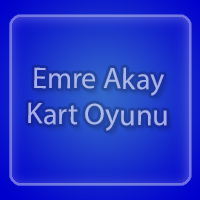
<style>
.page{position:relative;width:200px;height:200px}
.page>*{position:absolute;margin:0}
.t1{font:30px "MyriadPro-Regular";color:#aab4e6}
</style>
<div class="page">
<p class="t1" style="left:28px;top:67px;width:139px;height:64px;text-align:center;rotate:1deg">Emre Akay<br>Kart Oyunu</p>
</div>
